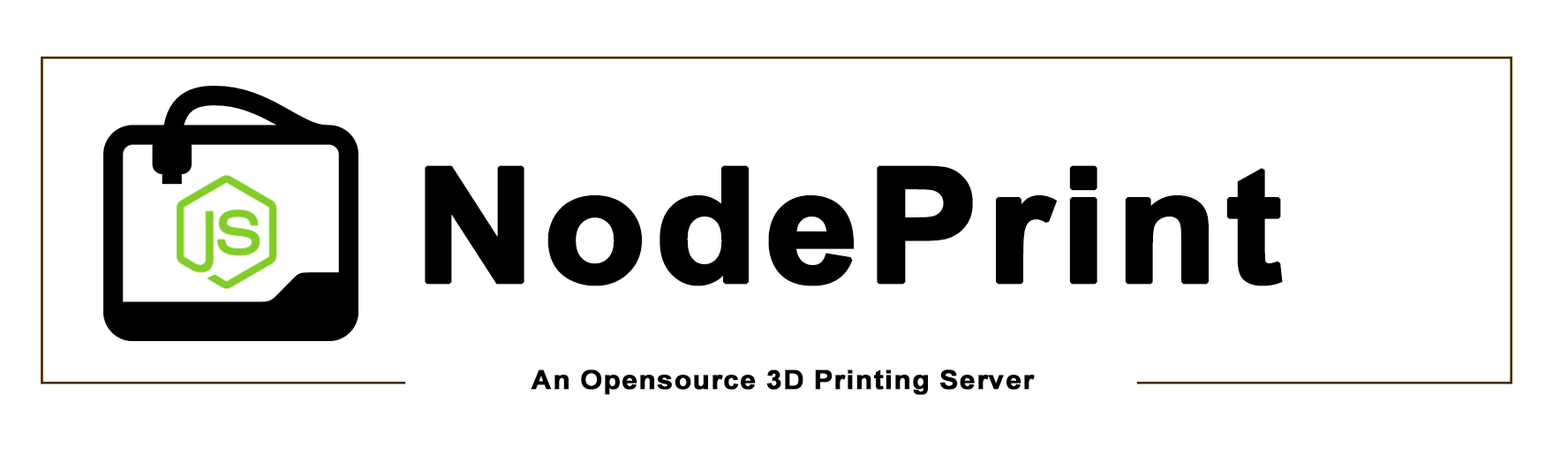
<style>
.page{position:relative;width:1568px;height:456px;background:#ffffff}
.page>*{position:absolute;margin:0}
.t1{font:158.9px "Arial-BoldMT";letter-spacing:0.025em;color:#000000;font-weight:bold;scale:1.05 1}
.t2{font:26.5px "Arial-BoldMT";letter-spacing:0.025em;color:#000000;font-weight:bold;scale:1.05 1}
</style>
<div class="page">
<p class="t1" style="left:425px;top:165px;width:858px;height:121px">NodePrint</p>
<p class="t2" style="left:531px;top:369px;width:504px;height:26px">An Opensource 3D Printing Server</p>
</div>
